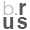
<style>
.page{position:relative;width:30px;height:30px;background:#ffffff}
.page>*{position:absolute;margin:0}
.t1{font:19.9px/13.3px "Helvetica-Bold";letter-spacing:-0.02em;color:#575757}
.t2{font:19.9px/13.3px "Helvetica-Light";letter-spacing:-0.02em;color:#bfbfbf}
.t3{font:19.9px/13.3px "Helvetica";letter-spacing:-0.02em;color:#bfbfbf}
</style>
<div class="page">
<p class="t1" style="left:3px;top:1px;width:24px;height:28px"><span class="t2">b</span><span class="t3">.</span>r<br>u s</p>
</div>
